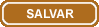
<style>
.page{position:relative;width:99px;height:27px;background:#ae6c1e}
.page>*{position:absolute;margin:0}
.t1{font:12px "Arial-BoldMT";color:#ffffff}
</style>
<div class="page">
<p class="t1" style="left:26px;top:9px;width:48px;height:10px">SALVAR</p>
</div>
